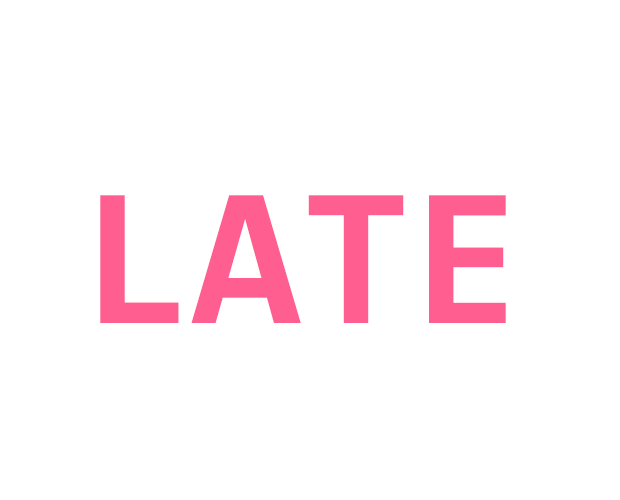
<style>
.page{position:relative;width:620px;height:500px;background:#ffffff}
.page>*{position:absolute;margin:0}
.t1{font:200px "Consolas-Bold";color:#ff5f90}
</style>
<div class="page">
<p class="t1" style="left:100px;top:195px;width:406px;height:128px">LATE</p>
</div>
